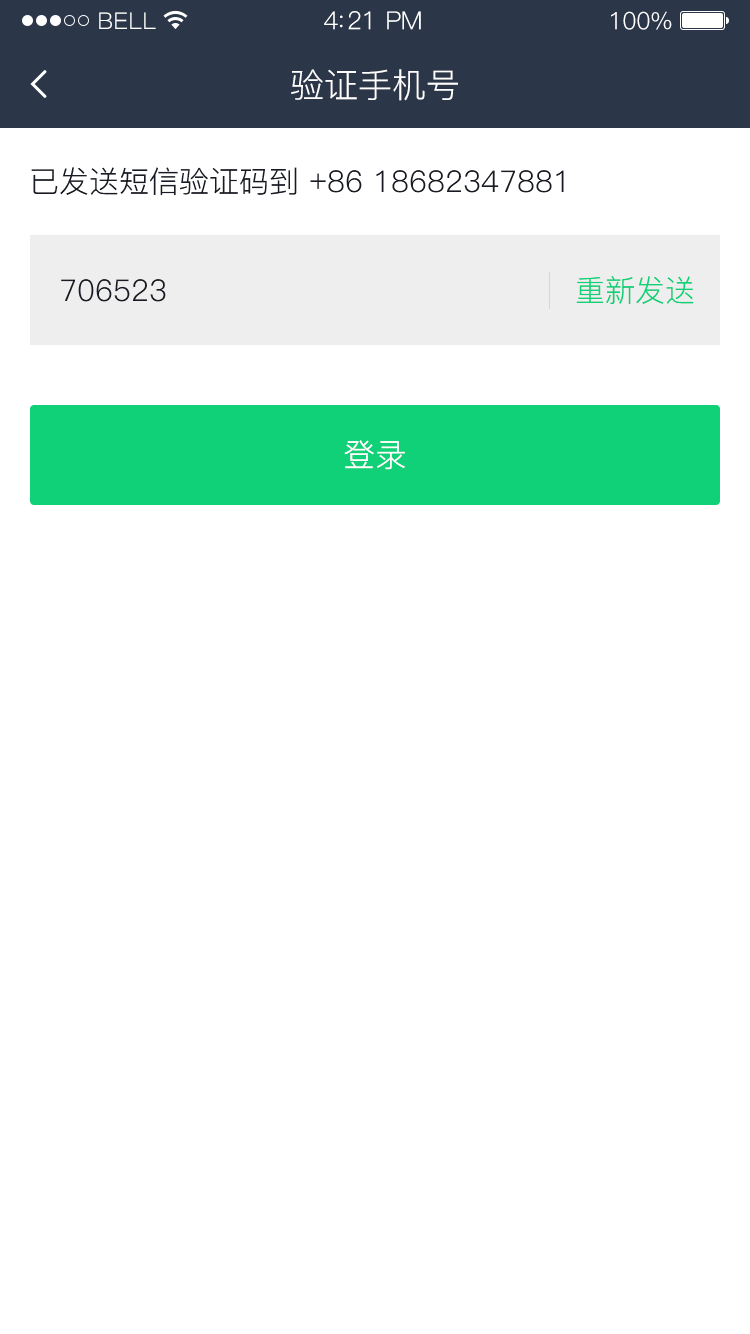
<style>
.page{position:relative;width:750px;height:1334px;background:#ffffff}
.page>*{position:absolute;margin:0}
.t1{font:23px "PingFang-SC-Regular";letter-spacing:0.02em;color:#ffffff}
.t2{font:25px "PingFang-SC-Regular";letter-spacing:-0.02em;color:#ffffff}
.t3{font:24px "PingFang-SC-Regular";letter-spacing:-0.02em;color:#ffffff}
.t4{font:34px "PingFang-SC-Regular";color:#ffffff}
.t5{font:30px "PingFang-SC-Regular";color:#181b23}
.t6{font:30px "PingFang-SC-Regular";color:#10d078}
.t7{font:32px "PingFang-SC-Regular";color:#ffffff}
</style>
<div class="page">
<p class="t1" style="left:99px;top:12px;width:57px;height:17px">BELL</p>
<p class="t2" style="left:324px;top:11px;width:97px;height:19px">4:21 PM</p>
<p class="t3" style="left:611px;top:11px;width:61px;height:19px">100%</p>
<p class="t4" style="left:291px;top:69px;width:167px;height:32px">验证手机号</p>
<p class="t5" style="left:31px;top:167px;width:533px;height:28px">已发送短信验证码到 +86 18682347881</p>
<p class="t5" style="left:61px;top:279px;width:105px;height:23px">706523</p>
<p class="t6" style="left:576px;top:276px;width:118px;height:28px">重新发送</p>
<p class="t7" style="left:344px;top:440px;width:61px;height:30px">登录</p>
</div>
